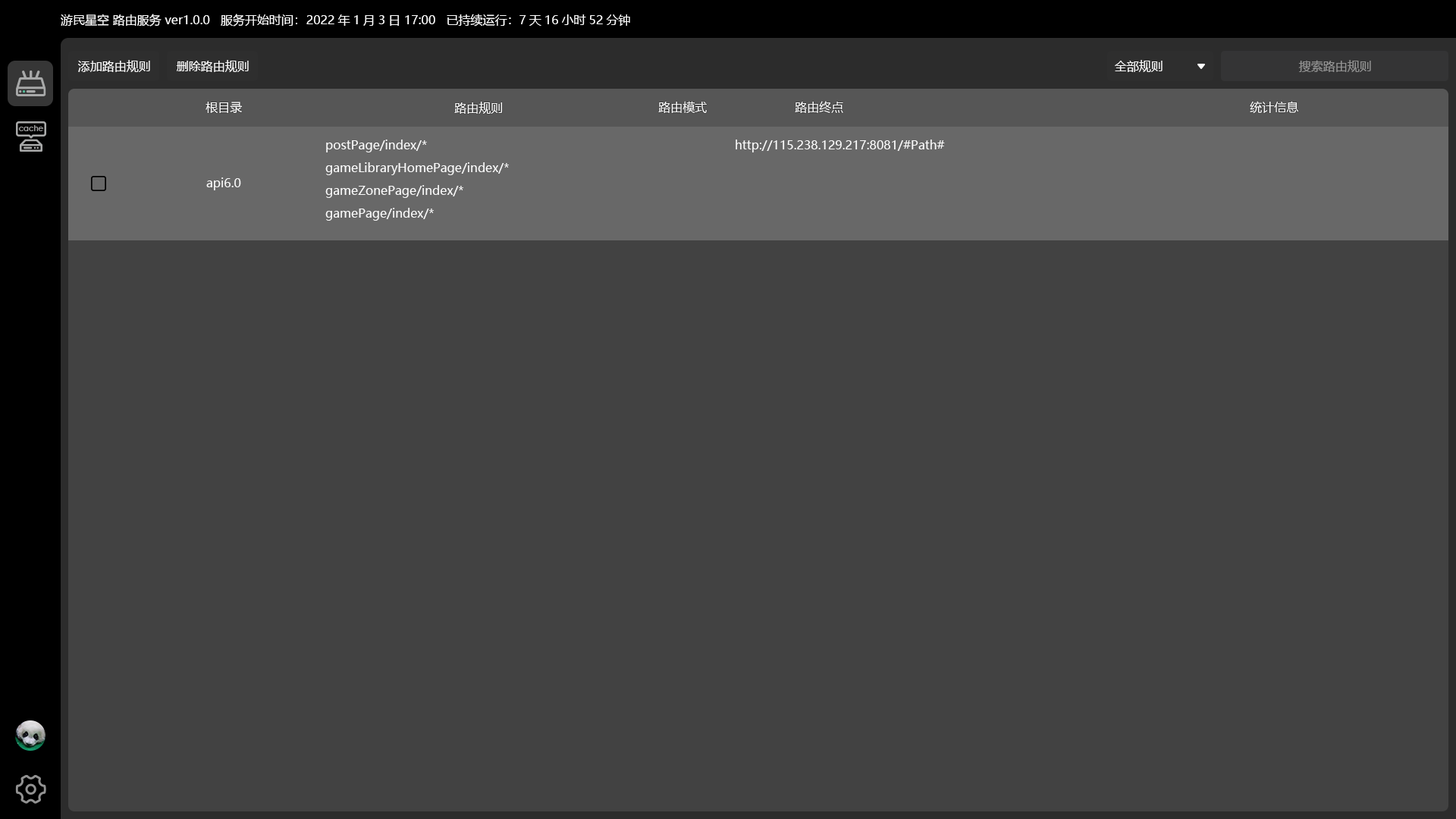
<style>
.page{position:relative;width:1456px;height:819px;background:#424242}
.page>*{position:absolute;margin:0}
.t1{font:12.1px "MicrosoftYaHeiUI";color:#fafafa}
.t2{font:12.1px "MicrosoftYaHeiUI";color:#939393}
.t3{font:12.1px/22.7px "MicrosoftYaHeiUI";color:#fafafa}
</style>
<div class="page">
<p class="t1" style="left:61px;top:14px;width:569px;height:13px">游民星空 路由服务 ver1.0.0   服务开始时间： 2022年1月3日 17:00   已持续运行：7天16小时52分钟</p>
<p class="t1" style="left:78px;top:60px;width:72px;height:12px">添加路由规则</p>
<p class="t1" style="left:176px;top:60px;width:73px;height:12px">删除路由规则</p>
<p class="t1" style="left:1115px;top:60px;width:48px;height:12px">全部规则</p>
<p class="t2" style="left:1298px;top:60px;width:73px;height:12px">搜索路由规则</p>
<p class="t1" style="left:206px;top:102px;width:37px;height:11px">根目录</p>
<p class="t1" style="left:454px;top:102px;width:49px;height:12px">路由规则</p>
<p class="t1" style="left:658px;top:101px;width:49px;height:12px">路由模式</p>
<p class="t1" style="left:795px;top:101px;width:48px;height:12px">路由终点</p>
<p class="t1" style="left:1250px;top:101px;width:49px;height:13px">统计信息</p>
<p class="t3" style="left:325px;top:140px;width:184px;height:81px">postPage/index/*<br>gameLibraryHomePage/index/*<br>gameZonePage/index/*<br>gamePage/index/*</p>
<p class="t1" style="left:736px;top:140px;width:209px;height:12px">http://115.238.129.217:8081/#Path#</p>
<p class="t1" style="left:206px;top:177px;width:35px;height:13px">api6.0</p>
</div>
